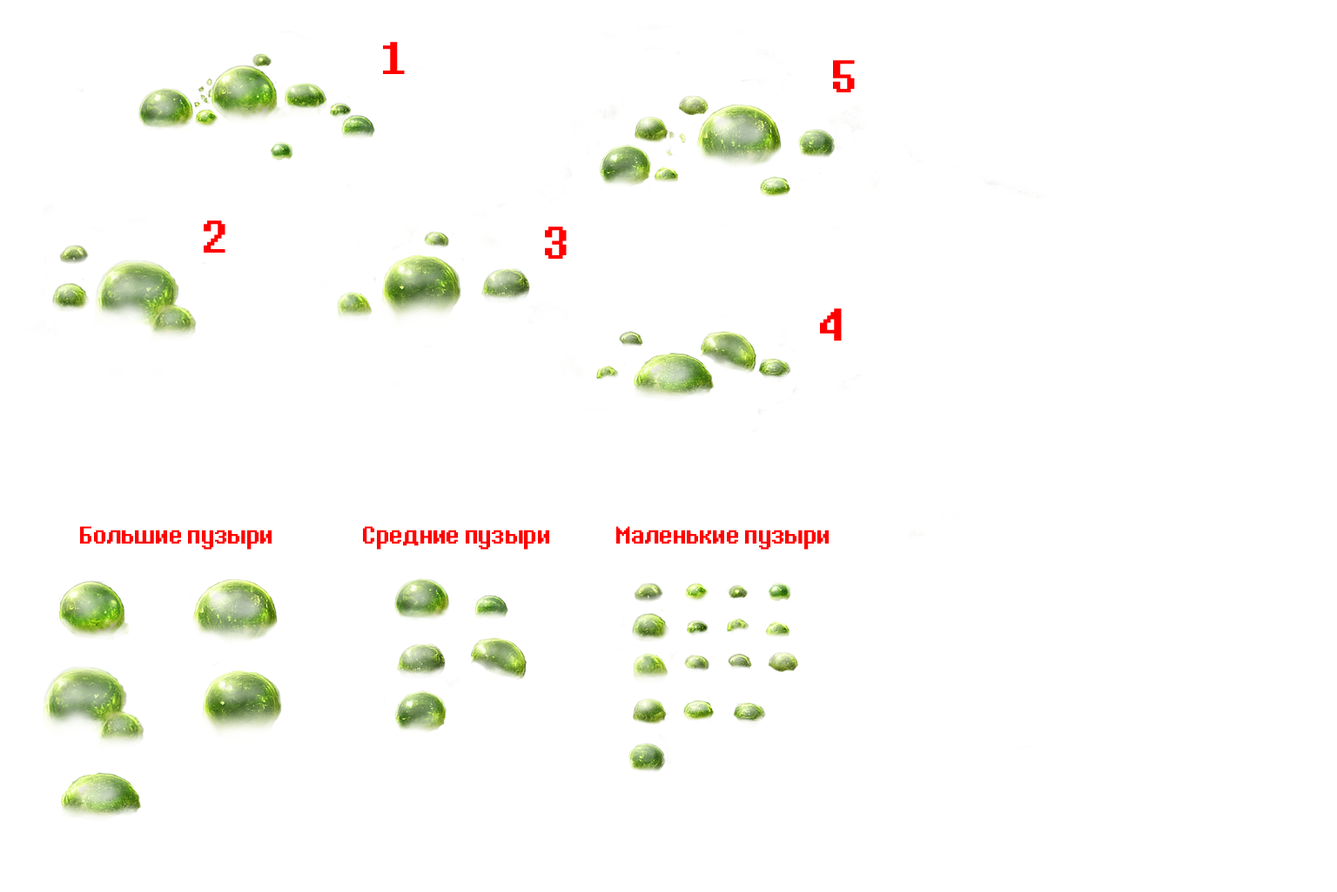
<style>
.page{position:relative;width:1337px;height:892px;background:#ffffff}
.page>*{position:absolute;margin:0}
.t1{font:57px "8bitoperatorJVERUS-Regular";color:#ff0000}
.t2{font:30.3px "8bitoperatorJVERUS-Regular";color:#ff0000}
</style>
<div class="page">
<p class="t1" style="left:383px;top:42px;width:22px;height:32px">1</p>
<p class="t1" style="left:833px;top:60px;width:22px;height:32px">5</p>
<p class="t1" style="left:204px;top:220px;width:22px;height:33px">2</p>
<p class="t1" style="left:545px;top:226px;width:22px;height:33px">3</p>
<p class="t1" style="left:820px;top:308px;width:22px;height:32px">4</p>
<p class="t2" style="left:80px;top:526px;width:192px;height:23px">Большие пузыри</p>
<p class="t2" style="left:363px;top:526px;width:186px;height:23px">Средние пузыри</p>
<p class="t2" style="left:616px;top:526px;width:213px;height:23px">Маленькие пузыри</p>
</div>
